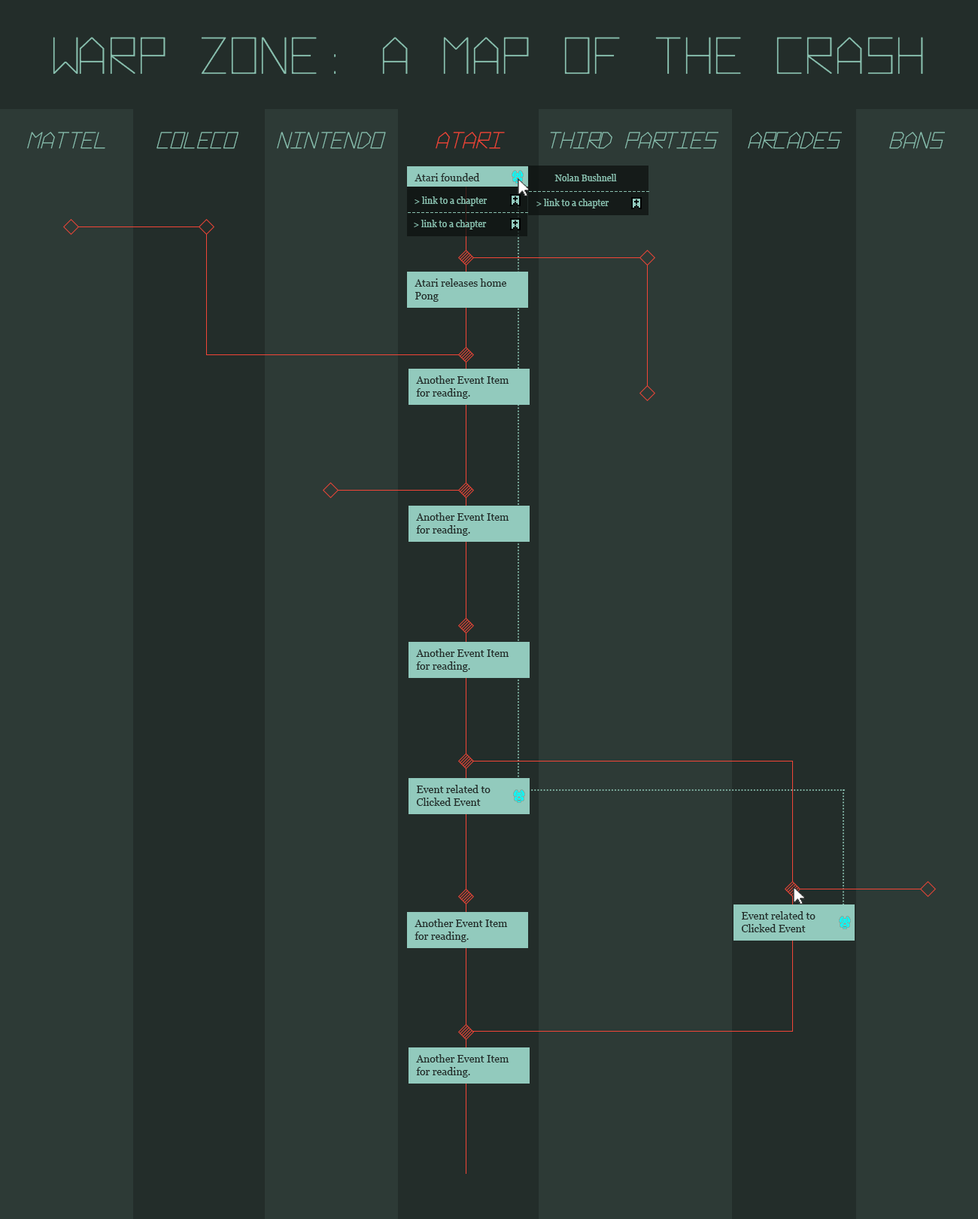
<style>
.page{position:relative;width:978px;height:1219px;background:#2d3a36}
.page>*{position:absolute;margin:0}
.t1{font:49.7px "Hyperspace";color:#89c0af}
.t2{font:21.8px "Hyperspace-Italic";color:#89c0af}
.t3{font:21.8px "Hyperspace-Italic";color:#f24537}
.t4{font:10.5px "Georgia";color:#232d2a}
.t5{font:9px "Georgia";color:#89c0af}
</style>
<div class="page">
<p class="t1" style="left:53px;top:37px;width:870px;height:37px">Warp Zone: A Map of the Crash</p>
<p class="t2" style="left:27px;top:132px;width:78px;height:17px">Mattel</p>
<p class="t2" style="left:157px;top:132px;width:82px;height:17px">Coleco</p>
<p class="t2" style="left:277px;top:132px;width:109px;height:17px">Nintendo</p>
<p class="t3" style="left:436px;top:132px;width:69px;height:17px">Atari</p>
<p class="t2" style="left:550px;top:132px;width:169px;height:17px">third Parties</p>
<p class="t2" style="left:748px;top:132px;width:94px;height:17px">Arcades</p>
<p class="t2" style="left:889px;top:132px;width:56px;height:17px">bans</p>
<p class="t4" style="left:415px;top:173px;width:65px;height:8px">Atari founded</p>
<p class="t5" style="left:555px;top:174px;width:62px;height:7px">Nolan Bushnell</p>
<p class="t5" style="left:415px;top:196px;width:73px;height:10px">&gt; link to a chapter</p>
<p class="t5" style="left:537px;top:199px;width:72px;height:9px">&gt; link to a chapter</p>
<p class="t5" style="left:414px;top:220px;width:73px;height:10px">&gt; link to a chapter</p>
<p class="t4" style="left:415px;top:278px;width:92px;height:24px">Atari releases home<br>Pong</p>
<p class="t4" style="left:416px;top:375px;width:93px;height:24px">Another Event Item<br>for reading.</p>
<p class="t4" style="left:416px;top:512px;width:93px;height:24px">Another Event Item<br>for reading.</p>
<p class="t4" style="left:416px;top:649px;width:93px;height:23px">Another Event Item<br>for reading.</p>
<p class="t4" style="left:416px;top:785px;width:75px;height:21px">Event related to<br>Clicked Event</p>
<p class="t4" style="left:741px;top:911px;width:75px;height:21px">Event related to <br>Clicked Event</p>
<p class="t4" style="left:415px;top:919px;width:93px;height:23px">Another Event Item<br>for reading.</p>
<p class="t4" style="left:416px;top:1054px;width:93px;height:24px">Another Event Item<br>for reading.</p>
</div>
